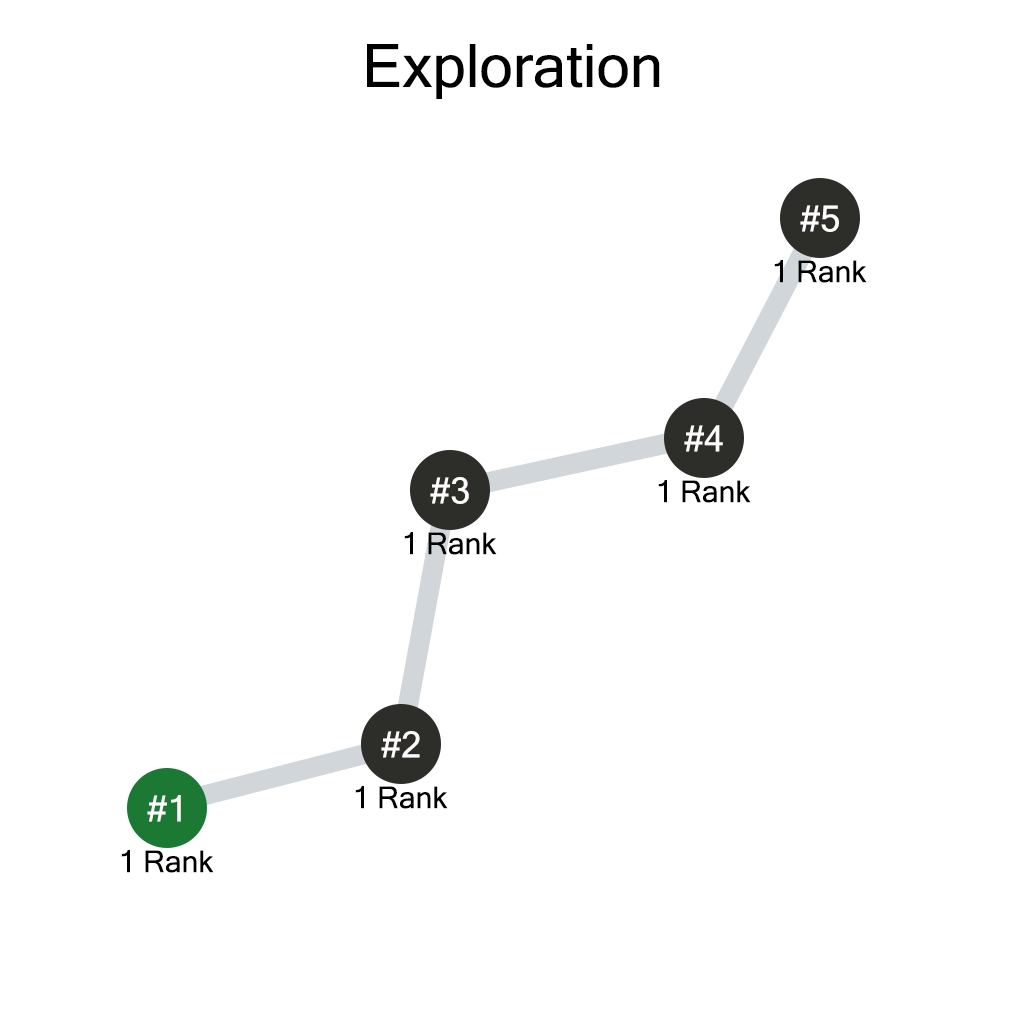
<style>
.page{position:relative;width:1024px;height:1024px;background:#ffffff}
.page>*{position:absolute;margin:0}
.t1{font:60px "MicrosoftSansSerif";color:#000000}
.t2{font:36px "MicrosoftSansSerif";color:#fefafc}
.t3{font:30px "MicrosoftSansSerif";color:#000000}
</style>
<div class="page">
<p class="t1" style="left:367px;top:44px;width:293px;height:55px">Exploration</p>
<p class="t2" style="left:800px;top:205px;width:39px;height:27px">#5</p>
<p class="t3" style="left:774px;top:260px;width:93px;height:23px">1 Rank</p>
<p class="t2" style="left:684px;top:425px;width:39px;height:27px">#4</p>
<p class="t2" style="left:430px;top:477px;width:39px;height:27px">#3</p>
<p class="t3" style="left:658px;top:480px;width:93px;height:23px">1 Rank</p>
<p class="t3" style="left:404px;top:532px;width:93px;height:23px">1 Rank</p>
<p class="t2" style="left:381px;top:731px;width:39px;height:27px">#2</p>
<p class="t2" style="left:147px;top:795px;width:34px;height:27px">#1</p>
<p class="t3" style="left:355px;top:786px;width:93px;height:23px">1 Rank</p>
<p class="t3" style="left:121px;top:850px;width:93px;height:23px">1 Rank</p>
</div>
